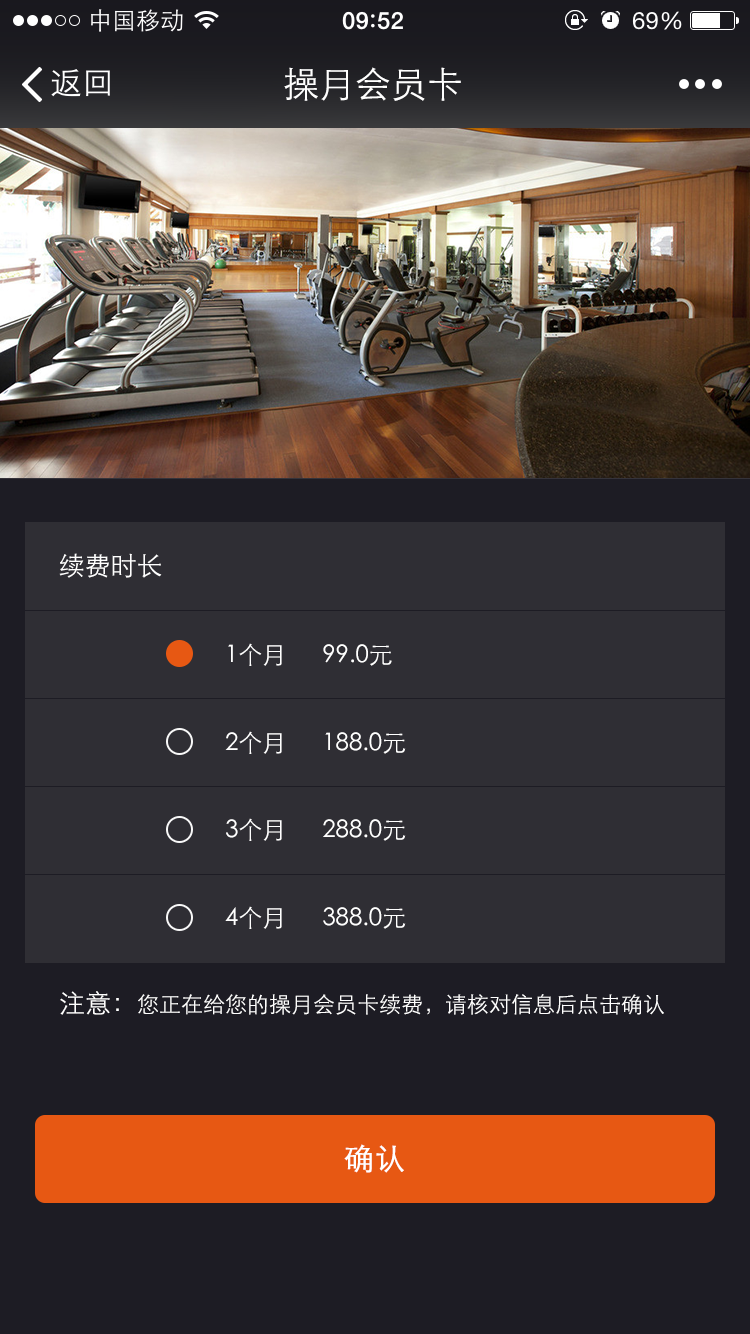
<style>
.page{position:relative;width:750px;height:1334px;background:#2f2e34}
.page>*{position:absolute;margin:0}
.t1{font:36px "STXihei";color:#ffffff}
.t2{font:26px "STXihei";color:#ffffff}
.t3{font:24px "STXihei";color:#ffffff}
.t4{font:22px "STXihei";color:#ffffff}
.t5{font:30px "STXihei";color:#ffffff;font-weight:bold}
</style>
<div class="page">
<p class="t1" style="left:284px;top:67px;width:177px;height:34px">操月会员卡</p>
<p class="t2" style="left:59px;top:553px;width:103px;height:25px">续费时长</p>
<p class="t3" style="left:228px;top:643px;width:164px;height:23px">1个月      99.0元</p>
<p class="t3" style="left:225px;top:731px;width:181px;height:23px">2个月      188.0元</p>
<p class="t3" style="left:226px;top:818px;width:180px;height:23px">3个月      288.0元</p>
<p class="t3" style="left:225px;top:906px;width:181px;height:23px">4个月      388.0元</p>
<p class="t4" style="left:60px;top:991px;width:604px;height:24px"><span class="t2">注意：</span>您正在给您的操月会员卡续费，请核对信息后点击确认</p>
<p class="t5" style="left:344px;top:1144px;width:60px;height:29px">确认</p>
</div>
